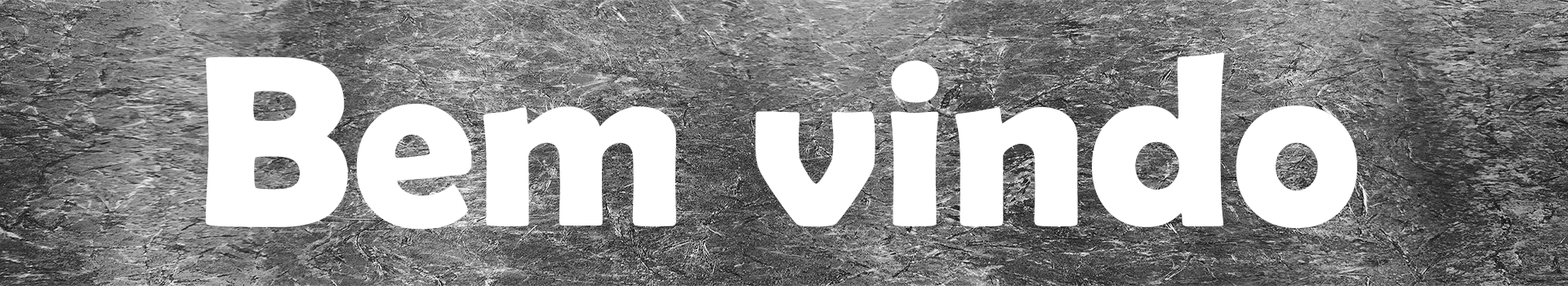
<style>
.page{position:relative;width:1568px;height:286px;background:#ffffff}
.page>*{position:absolute;margin:0}
.t1{font:245px "BerlinSansFBDemi-Bold";color:#ffffff}
</style>
<div class="page">
<p class="t1" style="left:205px;top:52px;width:1152px;height:177px">Bem vindo</p>
</div>
